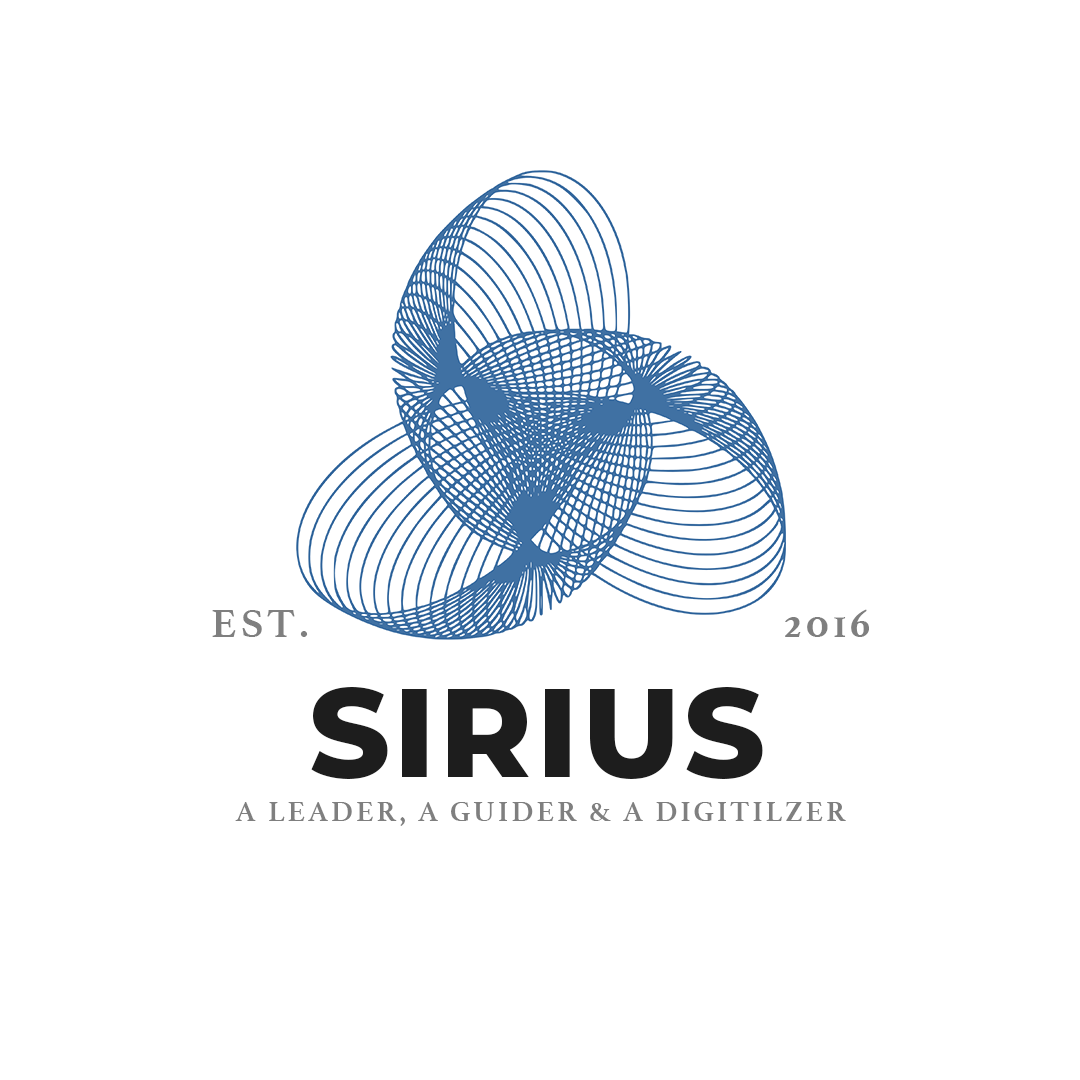
<style>
.page{position:relative;width:1080px;height:1080px;background:#ffffff}
.page>*{position:absolute;margin:0}
.t1{font:41.7px "Athelas-Bold";letter-spacing:0.1em;color:#7f7f7f}
.t2{font:125px "Montserrat-ExtraBold";letter-spacing:0.03em;color:#1d1d1d}
.t3{font:29.2px "Athelas-Bold";letter-spacing:0.1em;color:#7f7f7f}
</style>
<div class="page">
<p class="t1" style="left:212px;top:610px;width:96px;height:27px">EST.</p>
<p class="t1" style="left:785px;top:609px;width:84px;height:28px">2016</p>
<p class="t2" style="left:311px;top:687px;width:452px;height:92px">SIRIUS</p>
<p class="t3" style="left:235px;top:802px;width:611px;height:24px">A LEADER, A GUIDER &amp; A DIGITILZER</p>
</div>
